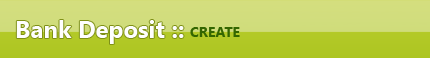
<style>
.page{position:relative;width:430px;height:58px}
.page>*{position:absolute;margin:0}
.t1{font:24px "SegoeUI-Bold";color:#fefefe}
.t2{font:14px "SegoeUI-Bold";color:#336600}
</style>
<div class="page">
<p class="t1" style="left:16px;top:20px;width:168px;height:24px">Bank Deposit ::</p>
<p class="t2" style="left:190px;top:27px;width:50px;height:10px">CREATE</p>
</div>
